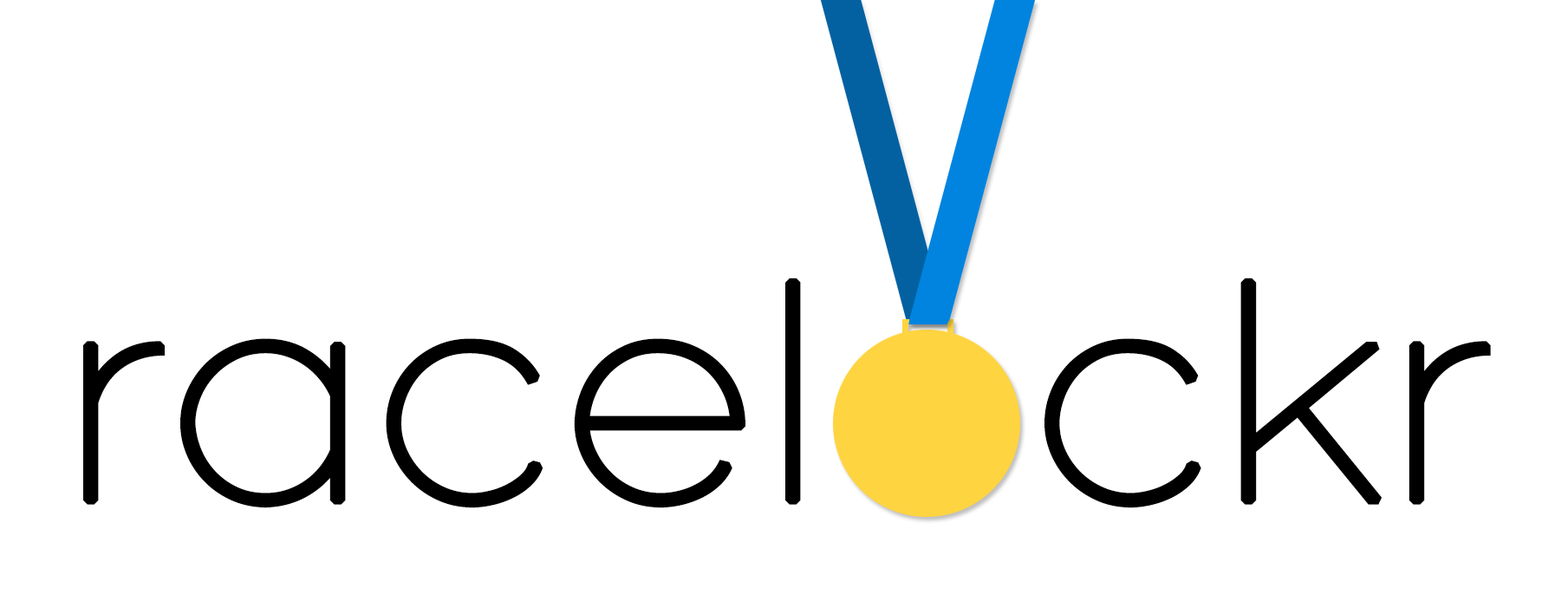
<style>
.page{position:relative;width:1568px;height:608px;background:#ffffff}
.page>*{position:absolute;margin:0}
.t1{font:298.2px "Raleway-Thin";color:#000000;font-weight:bold;scale:1.1 1}
</style>
<div class="page">
<p class="t1" style="left:83px;top:277px;width:1408px;height:231px">racelockr</p>
</div>
